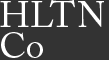
<style>
.page{position:relative;width:109px;height:60px;background:#333333}
.page>*{position:absolute;margin:0}
.t1{font:36px/31.1px "ACaslonPro-Regular";color:#ffffff}
.t2{font:36px/31.1px "ACaslonPro-Regular";letter-spacing:-0.1em;color:#ffffff}
.t3{font:36px/31.1px "ACaslonPro-Regular";letter-spacing:0.025em;color:#ffffff}
.t4{font:36px/31.1px "ACaslonPro-Regular";letter-spacing:0.005em;color:#ffffff}
</style>
<div class="page">
<p class="t1" style="left:0px;top:0px;width:104px;height:58px">H<span class="t2">L</span><span class="t3">T</span><span class="t4">N <br></span>Co</p>
</div>
